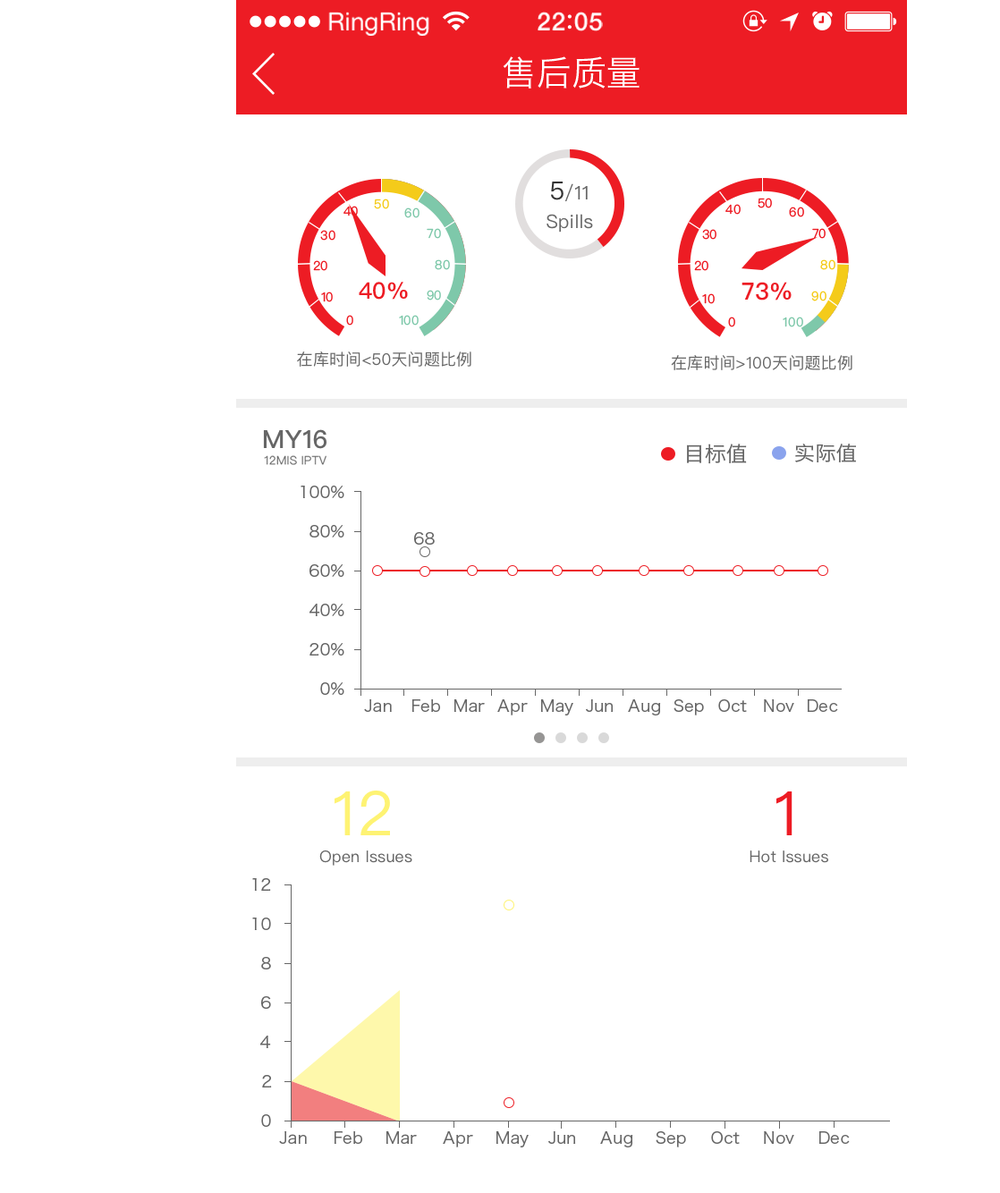
<style>
.page{position:relative;width:1000px;height:1193px;background:#ffffff}
.page>*{position:absolute;margin:0}
.t1{font:25.1px "HelveticaNeue";color:#ffffff}
.t2{font:25.1px "HelveticaNeue-Medium";letter-spacing:0.03em;color:#ffffff}
.t3{font:34.6px "HiraginoSansGB-W3";letter-spacing:0.01em;color:#ffffff}
.t4{font:25px "PingFangSC-Regular";letter-spacing:0.01em;color:#333333}
.t5{font:18.8px "PingFangSC-Regular";letter-spacing:0.01em;color:#666666}
.t6{font:12.5px "PingFangSC-Regular";letter-spacing:0.01em;color:#ed1c24}
.t7{font:12.5px "PingFangSC-Regular";letter-spacing:0.01em;color:#f4cb1a}
.t8{font:12.5px "PingFangSC-Regular";letter-spacing:0.01em;color:#7ec8aa}
.t9{font:22.9px "PingFangSC-Medium";letter-spacing:0.01em;color:#ed1c24}
.t10{font:23.7px "PingFangSC-Medium";letter-spacing:0.01em;color:#ed1c24}
.t11{font:16.1px "PingFangSC-Regular";letter-spacing:0.01em;color:#666666}
.t12{font:25px "PingFangSC-Medium";letter-spacing:0.01em;color:#666666}
.t13{font:20.7px "HiraginoSansGB-W3";letter-spacing:0.01em;color:#666666}
.t14{font:19.8px "HiraginoSansGB-W3";letter-spacing:0.01em;color:#666666;scale:1.05 1}
.t15{font:11.7px "PingFangSC-Regular";letter-spacing:0.01em;color:#666666}
.t16{font:16.1px "HiraginoSansGB-W3";letter-spacing:0.01em;color:#666666}
.t17{font:61.5px "PingFangSC-Regular";letter-spacing:0.01em;color:#fef373}
.t18{font:61.5px "PingFangSC-Regular";letter-spacing:0.01em;color:#ed1c24}
</style>
<div class="page">
<p class="t1" style="left:328px;top:12px;width:101px;height:24px">RingRing</p>
<p class="t2" style="left:537px;top:12px;width:66px;height:19px">22 05</p>
<p class="t3" style="left:503px;top:56px;width:136px;height:33px">售后质量</p>
<p class="t4" style="left:551px;top:182px;width:12px;height:18px">5</p>
<p class="t5" style="left:564px;top:183px;width:23px;height:19px">/11</p>
<p class="t6" style="left:757px;top:198px;width:15px;height:10px">50</p>
<p class="t6" style="left:343px;top:206px;width:15px;height:10px">40</p>
<p class="t7" style="left:374px;top:199px;width:15px;height:10px">50</p>
<p class="t8" style="left:404px;top:207px;width:15px;height:11px">60</p>
<p class="t6" style="left:725px;top:204px;width:15px;height:11px">40</p>
<p class="t6" style="left:789px;top:207px;width:15px;height:10px">60</p>
<p class="t5" style="left:546px;top:214px;width:47px;height:18px">Spills</p>
<p class="t6" style="left:320px;top:230px;width:15px;height:11px">30</p>
<p class="t8" style="left:427px;top:228px;width:14px;height:11px">70</p>
<p class="t6" style="left:702px;top:229px;width:14px;height:11px">30</p>
<p class="t6" style="left:812px;top:228px;width:13px;height:11px">70</p>
<p class="t6" style="left:313px;top:260px;width:14px;height:11px">20</p>
<p class="t8" style="left:435px;top:259px;width:15px;height:11px">80</p>
<p class="t6" style="left:694px;top:260px;width:14px;height:11px">20</p>
<p class="t7" style="left:820px;top:259px;width:15px;height:11px">80</p>
<p class="t9" style="left:359px;top:282px;width:49px;height:18px">40%</p>
<p class="t10" style="left:741px;top:282px;width:50px;height:18px">73%</p>
<p class="t6" style="left:321px;top:291px;width:12px;height:11px">10</p>
<p class="t8" style="left:427px;top:290px;width:14px;height:10px">90</p>
<p class="t6" style="left:702px;top:293px;width:12px;height:11px">10</p>
<p class="t7" style="left:811px;top:291px;width:15px;height:10px">90</p>
<p class="t6" style="left:346px;top:315px;width:7px;height:10px">0</p>
<p class="t8" style="left:399px;top:315px;width:19px;height:10px">100</p>
<p class="t6" style="left:728px;top:317px;width:7px;height:10px">0</p>
<p class="t8" style="left:782px;top:317px;width:21px;height:10px">100</p>
<p class="t11" style="left:297px;top:351px;width:174px;height:16px">在库时间&lt;50天问题比例</p>
<p class="t11" style="left:671px;top:355px;width:181px;height:15px">在库时间&gt;100天问题比例</p>
<p class="t12" style="left:263px;top:429px;width:64px;height:20px">MY16</p>
<p class="t13" style="left:687px;top:444px;width:60px;height:20px">目标值</p>
<p class="t14" style="left:795px;top:444px;width:61px;height:18px">实际值</p>
<p class="t15" style="left:264px;top:455px;width:62px;height:10px">12MIS IPTV</p>
<p class="t16" style="left:300px;top:486px;width:44px;height:12px">100%</p>
<p class="t16" style="left:309px;top:525px;width:35px;height:12px">80%</p>
<p class="t16" style="left:414px;top:532px;width:21px;height:13px">68</p>
<p class="t16" style="left:309px;top:564px;width:35px;height:13px">60%</p>
<p class="t16" style="left:309px;top:604px;width:35px;height:12px">40%</p>
<p class="t16" style="left:309px;top:643px;width:35px;height:12px">20%</p>
<p class="t16" style="left:320px;top:682px;width:24px;height:13px">0%</p>
<p class="t16" style="left:364px;top:699px;width:28px;height:13px">Jan</p>
<p class="t16" style="left:411px;top:699px;width:29px;height:13px">Feb</p>
<p class="t16" style="left:453px;top:699px;width:32px;height:13px">Mar</p>
<p class="t16" style="left:497px;top:699px;width:31px;height:16px">Apr</p>
<p class="t16" style="left:540px;top:699px;width:33px;height:16px">May</p>
<p class="t16" style="left:586px;top:699px;width:27px;height:13px">Jun</p>
<p class="t16" style="left:628px;top:699px;width:33px;height:16px">Aug</p>
<p class="t16" style="left:673px;top:699px;width:31px;height:16px">Sep</p>
<p class="t16" style="left:718px;top:699px;width:29px;height:13px">Oct</p>
<p class="t16" style="left:764px;top:699px;width:30px;height:13px">Nov</p>
<p class="t16" style="left:807px;top:699px;width:31px;height:13px">Dec</p>
<p class="t17" style="left:334px;top:790px;width:56px;height:45px">12</p>
<p class="t18" style="left:776px;top:790px;width:16px;height:45px">1</p>
<p class="t11" style="left:319px;top:849px;width:93px;height:17px">Open Issues</p>
<p class="t11" style="left:749px;top:850px;width:79px;height:13px">Hot Issues</p>
<p class="t16" style="left:252px;top:878px;width:19px;height:13px">12</p>
<p class="t16" style="left:252px;top:917px;width:19px;height:13px">10</p>
<p class="t16" style="left:261px;top:957px;width:10px;height:12px">8</p>
<p class="t16" style="left:261px;top:996px;width:10px;height:13px">6</p>
<p class="t16" style="left:260px;top:1035px;width:11px;height:13px">4</p>
<p class="t16" style="left:262px;top:1075px;width:10px;height:12px">2</p>
<p class="t16" style="left:261px;top:1114px;width:10px;height:13px">0</p>
<p class="t16" style="left:279px;top:1131px;width:28px;height:13px">Jan</p>
<p class="t16" style="left:334px;top:1131px;width:28px;height:13px">Feb</p>
<p class="t16" style="left:385px;top:1131px;width:32px;height:13px">Mar</p>
<p class="t16" style="left:443px;top:1131px;width:30px;height:16px">Apr</p>
<p class="t16" style="left:495px;top:1131px;width:33px;height:16px">May</p>
<p class="t16" style="left:548px;top:1131px;width:28px;height:13px">Jun</p>
<p class="t16" style="left:600px;top:1131px;width:33px;height:16px">Aug</p>
<p class="t16" style="left:655px;top:1131px;width:31px;height:16px">Sep</p>
<p class="t16" style="left:711px;top:1131px;width:28px;height:13px">Oct</p>
<p class="t16" style="left:764px;top:1131px;width:30px;height:13px">Nov</p>
<p class="t16" style="left:818px;top:1131px;width:31px;height:13px">Dec</p>
</div>
